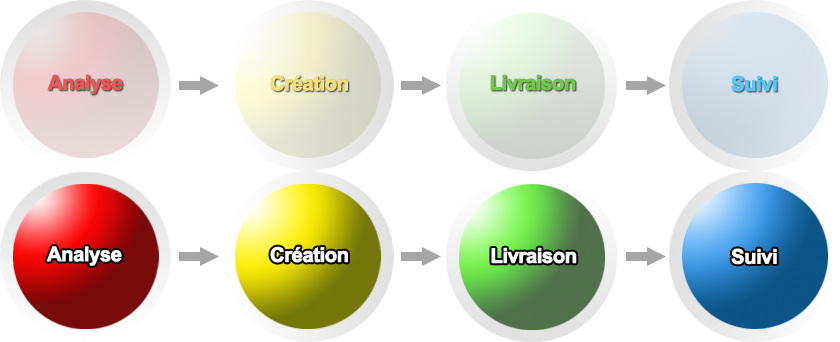
<style>
.page{position:relative;width:840px;height:342px;background:#ffffff}
.page>*{position:absolute;margin:0}
.t1{font:20.3px "Arial-BoldMT";letter-spacing:-0.05em;color:#e95757;font-weight:bold}
.t2{font:20.3px "Arial-BoldMT";letter-spacing:-0.05em;color:#f2e07d;font-weight:bold}
.t3{font:20.4px "Arial-BoldMT";letter-spacing:-0.05em;color:#70c74a;font-weight:bold}
.t4{font:20.3px "Arial-BoldMT";letter-spacing:-0.05em;color:#59c6f9;font-weight:bold}
.t5{font:20.3px "Arial-BoldMT";letter-spacing:-0.05em;color:#ffffff;font-weight:bold}
.t6{font:20.4px "Arial-BoldMT";letter-spacing:-0.05em;color:#ffffff;font-weight:bold}
</style>
<div class="page">
<p class="t1" style="left:47px;top:74px;width:76px;height:21px">Analyse</p>
<p class="t2" style="left:270px;top:75px;width:78px;height:16px">Création</p>
<p class="t3" style="left:490px;top:74px;width:86px;height:17px">Livraison</p>
<p class="t4" style="left:731px;top:75px;width:46px;height:17px">Suivi</p>
<p class="t5" style="left:46px;top:246px;width:76px;height:20px">Analyse</p>
<p class="t5" style="left:270px;top:246px;width:78px;height:17px">Création</p>
<p class="t6" style="left:491px;top:247px;width:86px;height:17px">Livraison</p>
<p class="t5" style="left:731px;top:248px;width:46px;height:17px">Suivi</p>
</div>
